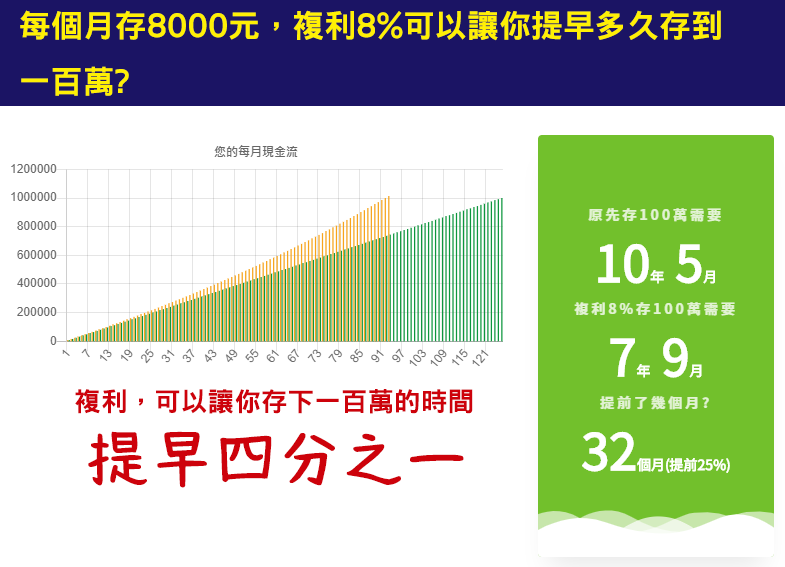
<style>
.page{position:relative;width:785px;height:567px;background:#ffffff}
.page>*{position:absolute;margin:0}
.t1{font:32px "DFNHei-W9-WINP-BF";color:#fff005}
.t2{font:26.7px "DFNHei-W9-WINP-BF";color:#cd020b}
.t3{font:64px "RiiTegakiN-R";color:#cd020b}
</style>
<div class="page">
<p class="t1" style="left:20px;top:10px;width:701px;height:86px">每個月存8000元，複利8%可以讓你提早多久存到<br>一百萬?</p>
<p class="t2" style="left:75px;top:389px;width:398px;height:25px">複利，可以讓你存下一百萬的時間</p>
<p class="t3" style="left:88px;top:431px;width:376px;height:57px">提早四分之一</p>
</div>
